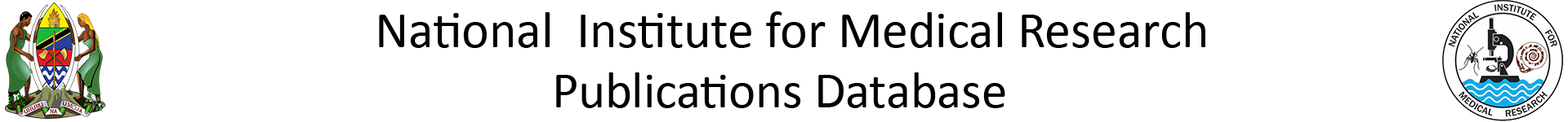
<style>
.page{position:relative;width:1568px;height:122px;background:#ffffff}
.page>*{position:absolute;margin:0}
.t1{font:52.1px "Calibri";color:#000102}
.t2{font:51px "Calibri";color:#000101}
</style>
<div class="page">
<p class="t1" style="left:379px;top:11px;width:826px;height:37px">National  Institute for Medical Research</p>
<p class="t2" style="left:556px;top:73px;width:449px;height:36px">Publications Database</p>
</div>
